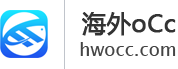
<style>
.page{position:relative;width:178px;height:69px;background:#ffffff}
.page>*{position:absolute;margin:0}
.t1{font:24px "MicrosoftYaHei";color:#333333;font-weight:bold}
.t2{font:18px "LucidaSansUnicode";color:#444444}
</style>
<div class="page">
<p class="t1" style="left:82px;top:12px;width:94px;height:24px">海外oCc</p>
<p class="t2" style="left:80px;top:42px;width:96px;height:14px">hwocc.com</p>
</div>
